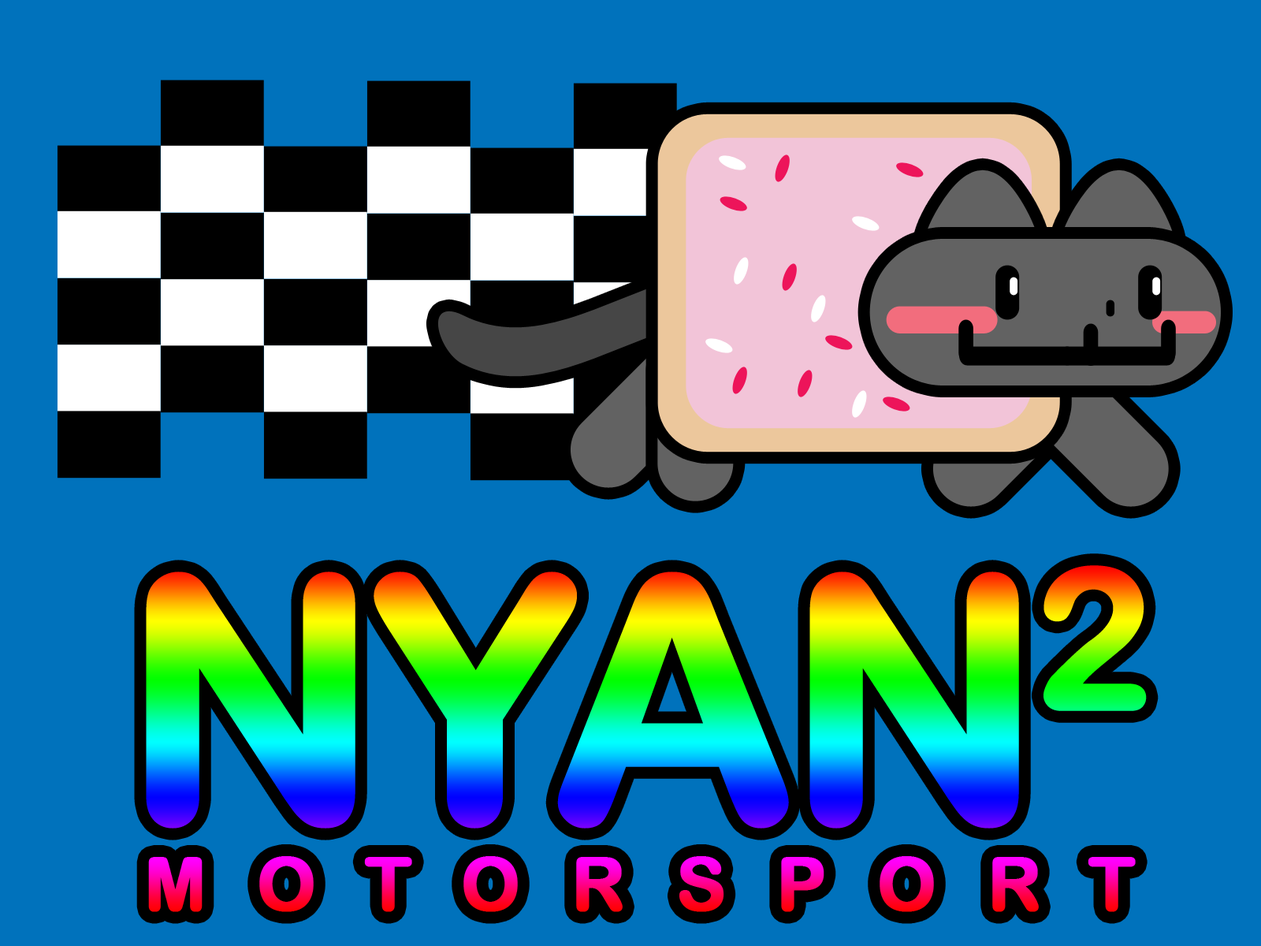
<style>
.page{position:relative;width:1261px;height:946px;background:#0072bc}
.page>*{position:absolute;margin:0}
.t1{font:73.9px "ArialRoundedMTBold";letter-spacing:0.67em;font-weight:bold}
.t2{font:336.6px "ArialRoundedMTBold";letter-spacing:-0.05em;font-weight:bold}
</style>
<div class="page">
<p class="t1" style="left:146px;top:565px;width:1001px;height:347px;text-align:center"><span class="t2">NYAN2<br></span>MOTORSPORT</p>
</div>
